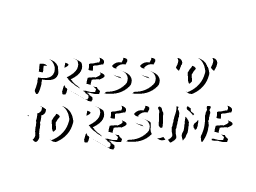
<style>
.page{position:relative;width:256px;height:192px;background:#ffffff}
.page>*{position:absolute;margin:0}
.t1{font:40px "Ninja-Naruto"}
</style>
<div class="page">
<p class="t1" style="left:26px;top:57px;width:207px;height:93px;text-align:center">Press  'o' <br>To Resume</p>
</div>
